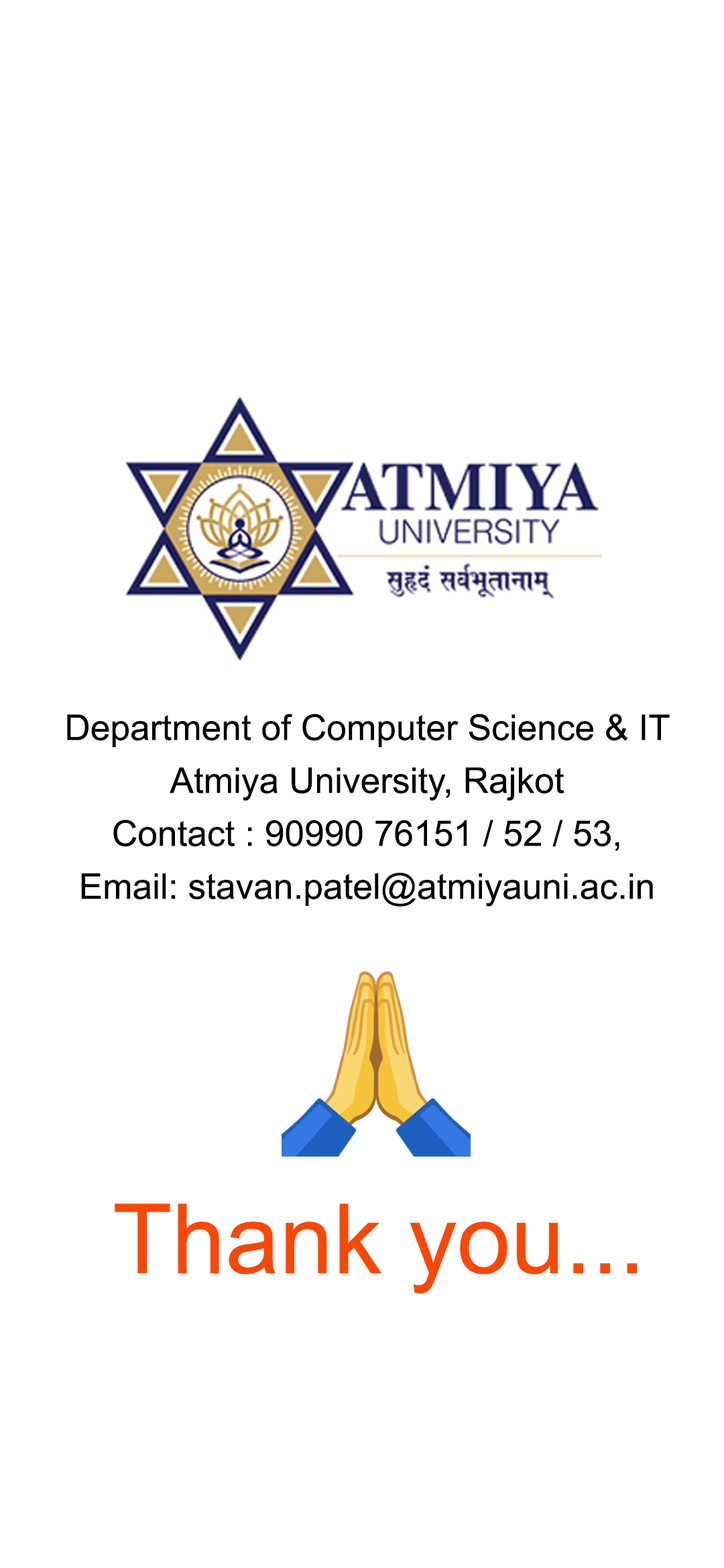
<style>
.page{position:relative;width:724px;height:1568px;background:#ffffff}
.page>*{position:absolute;margin:0}
.t1{font:35.7px/52.9px "ArialMT";color:#000000}
.t2{font:96.8px "ArialMT";color:#fc4700}
</style>
<div class="page">
<p class="t1" style="left:67px;top:714px;width:602px;height:193px;text-align:center">Department of Computer Science &amp; IT<br>Atmiya University, Rajkot<br>Contact : 90990 76151 / 52 / 53, <br>Email: stavan.patel@atmiyauni.ac.in</p>
<p class="t2" style="left:115px;top:1203px;width:522px;height:91px">Thank you...</p>
</div>
